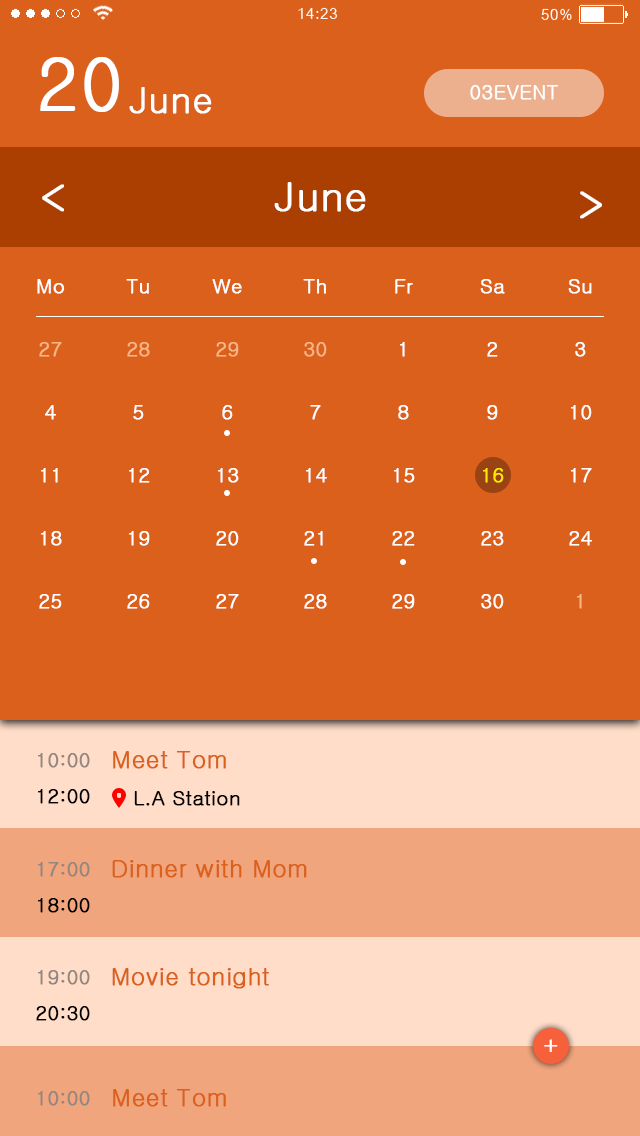
<style>
.page{position:relative;width:640px;height:1136px;background:#db601c}
.page>*{position:absolute;margin:0}
.t1{font:72px "Gulim";letter-spacing:0.002em;color:#ffffff;font-weight:bold}
.t2{font:36px "Gulim";letter-spacing:0.002em;color:#ffffff;font-weight:bold}
.t3{font:20px "Gulim";letter-spacing:0.002em;color:#ffffff;font-weight:bold}
.t4{font:40px "Gulim";letter-spacing:0.002em;color:#ffffff;font-weight:bold}
.t5{font:20px/63px "Gulim";color:#ffffff;font-weight:bold}
.t6{font:20px/63px "Gulim";color:#f7b585;font-weight:bold}
.t7{font:20px/63px "Gulim";color:#ffea00;font-weight:bold}
.t8{font:20px/36px "Gulim";color:#938680;font-weight:bold}
.t9{font:20px/36px "Gulim";color:#000000;font-weight:bold}
.t10{font:24px "Gulim";color:#db601c;font-weight:bold}
.t11{font:20px "Gulim";color:#000000;font-weight:bold}
.t12{font:24px "Gulim";color:#ffffff;font-weight:bold}
.t13{font:20px "Gulim";color:#938680;font-weight:bold}
</style>
<div class="page">
<p class="t1" style="left:40px;top:57px;width:79px;height:55px">20</p>
<p class="t2" style="left:129px;top:87px;width:83px;height:27px">June</p>
<p class="t3" style="left:470px;top:85px;width:88px;height:15px">03EVENT</p>
<p class="t4" style="left:42px;top:184px;width:22px;height:28px">&lt;</p>
<p class="t4" style="left:274px;top:182px;width:92px;height:30px">June</p>
<p class="t4" style="left:580px;top:191px;width:22px;height:28px">&gt;</p>
<p class="t5" style="left:37px;top:279px;width:28px;height:330px;text-align:center">Mo<br><span class="t6">27<br></span>4<br>11<br>18<br>25</p>
<p class="t5" style="left:126px;top:279px;width:24px;height:330px;text-align:center">Tu<br><span class="t6">28<br></span>5<br>12<br>19<br>26</p>
<p class="t5" style="left:212px;top:279px;width:30px;height:330px;text-align:center">We<br><span class="t6">29<br></span>6<br>13<br>20<br>27</p>
<p class="t5" style="left:303px;top:279px;width:24px;height:330px;text-align:center">Th<br><span class="t6">30<br></span>7<br>14<br>21<br>28</p>
<p class="t5" style="left:392px;top:279px;width:23px;height:330px;text-align:center">Fr<br>1<br>8<br>15<br>22<br>29</p>
<p class="t5" style="left:480px;top:279px;width:25px;height:330px;text-align:center">Sa<br>2<br>9<br><span class="t7">16<br></span>23<br>30</p>
<p class="t5" style="left:568px;top:279px;width:24px;height:330px;text-align:center">Su<br>3<br>10<br>17<br>24<br><span class="t6">1</span></p>
<p class="t8" style="left:38px;top:753px;width:52px;height:51px;text-align:center">10:00<br><span class="t9">12:00</span></p>
<p class="t10" style="left:113px;top:751px;width:113px;height:18px">Meet Tom</p>
<p class="t11" style="left:134px;top:791px;width:106px;height:15px">L.A Station</p>
<p class="t8" style="left:38px;top:862px;width:52px;height:51px;text-align:center">17:00<br><span class="t9">18:00</span></p>
<p class="t10" style="left:112px;top:860px;width:195px;height:18px">Dinner with Mom</p>
<p class="t8" style="left:36px;top:970px;width:54px;height:51px;text-align:center">19:00<br><span class="t9">20:30</span></p>
<p class="t10" style="left:112px;top:968px;width:157px;height:21px">Movie tonight</p>
<p class="t12" style="left:544px;top:1039px;width:14px;height:13px">+</p>
<p class="t13" style="left:38px;top:1091px;width:52px;height:15px">10:00</p>
<p class="t10" style="left:113px;top:1089px;width:113px;height:18px">Meet Tom</p>
</div>
